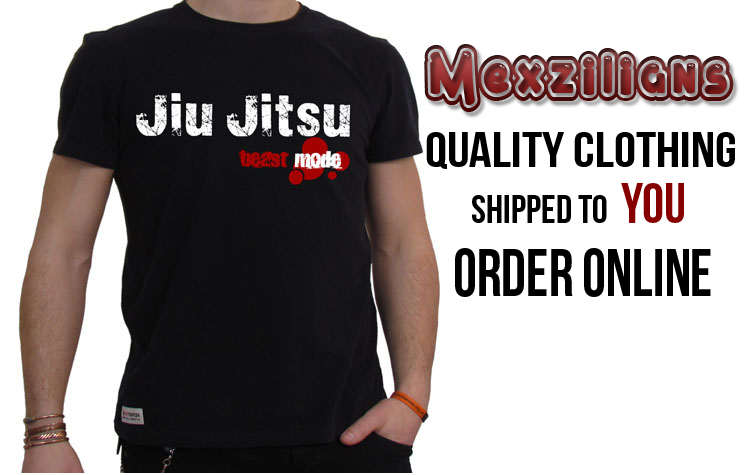
<style>
.page{position:relative;width:750px;height:475px;background:#ffffff}
.page>*{position:absolute;margin:0}
.t1{font:75.6px "MontRoyal";scale:0.83 1}
.t2{font:49.8px "BebasNeue";color:#000000;scale:1.13 1}
.t3{font:40px "BebasNeue";color:#000000}
.t4{font:56px "BebasNeue";color:#860000}
.t5{font:67.6px "BebasNeue";color:#000000;scale:0.9 1}
</style>
<div class="page">
<p class="t1" style="left:424px;top:44px;width:310px;height:68px">Mexzilians</p>
<p class="t2" style="left:426px;top:132px;width:309px;height:37px">quality clothing</p>
<p class="t3" style="left:472px;top:183px;width:212px;height:40px">shipped to  <span class="t4">you</span></p>
<p class="t5" style="left:455px;top:248px;width:256px;height:49px">order online</p>
</div>
